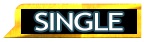
<style>
.page{position:relative;width:144px;height:42px;background:#ffffff}
.page>*{position:absolute;margin:0}
.t1{font:24px "TrebuchetMS";letter-spacing:-0.05em;color:#ffffff;scale:1.3 1}
</style>
<div class="page">
<p class="t1" style="left:35px;top:12px;width:88px;height:19px">SINGLE</p>
</div>
